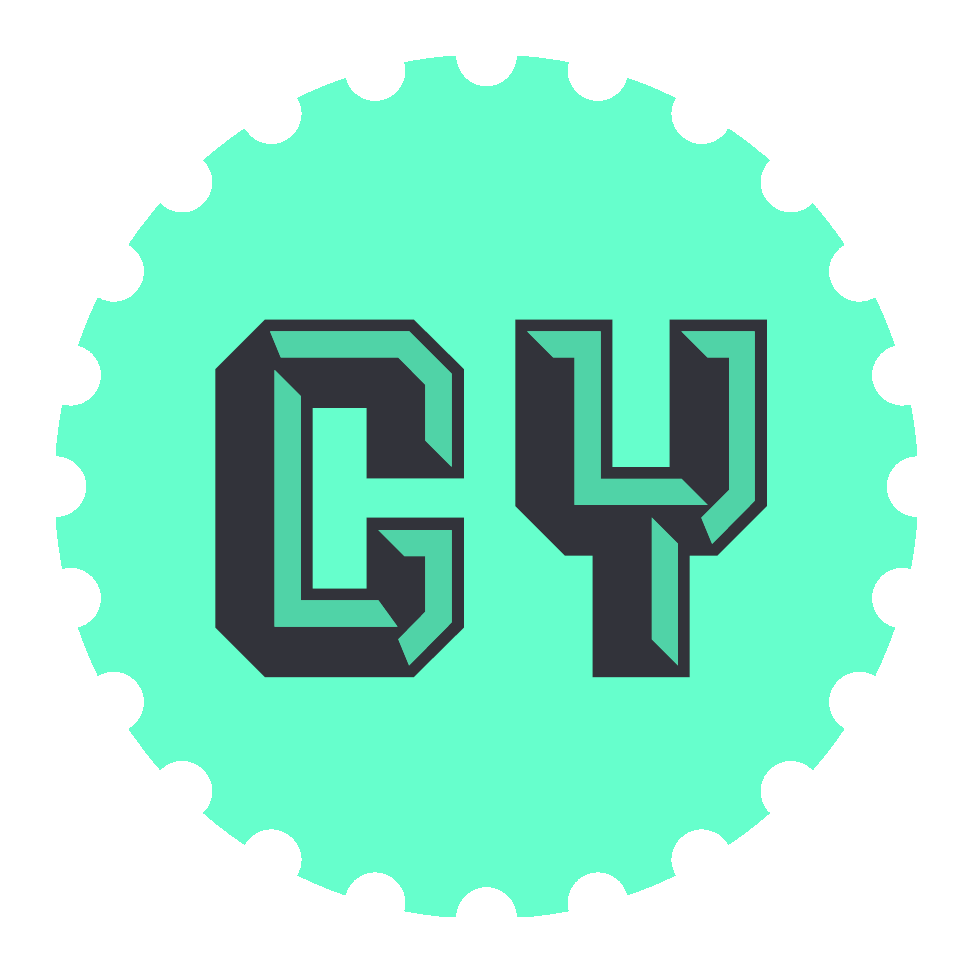
<style>
.page{position:relative;width:975px;height:975px;background:#66ffcc}
.page>*{position:absolute;margin:0}
.t1{font:510.7px "PowerStationBlock";letter-spacing:0.025em;color:#32333a;text-transform:uppercase}
</style>
<div class="page">
<p class="t1" style="left:215px;top:319px;width:552px;height:359px">CY</p>
</div>
